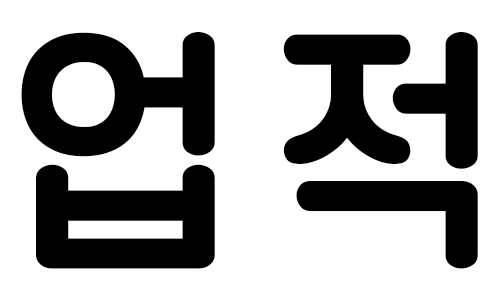
<style>
.page{position:relative;width:500px;height:300px;background:#ffffff}
.page>*{position:absolute;margin:0}
.t1{font:250px "TTAppgulimR";letter-spacing:0.2em;color:#000000}
</style>
<div class="page">
<p class="t1" style="left:21px;top:32px;width:457px;height:237px">업적</p>
</div>
